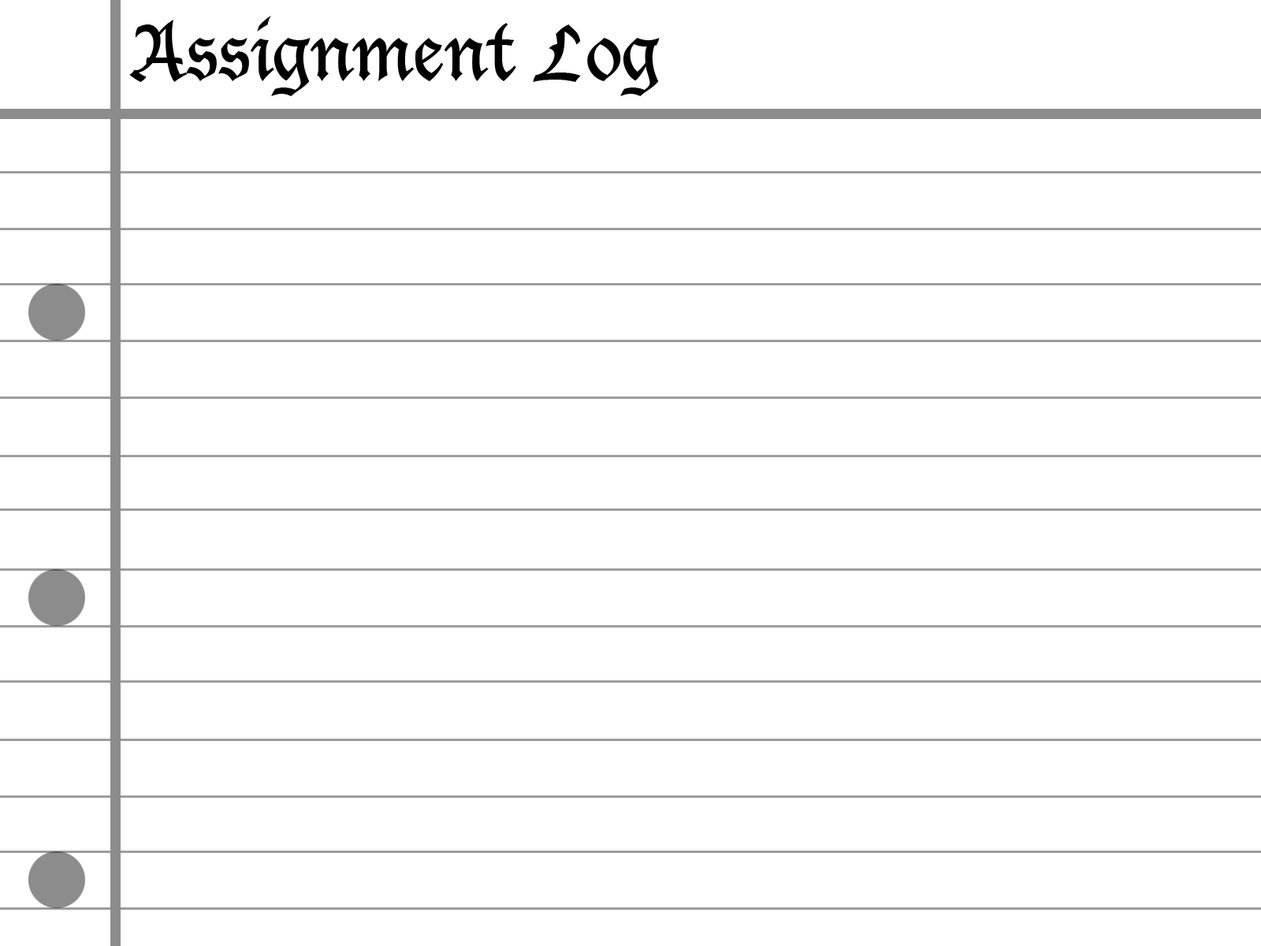
<style>
.page{position:relative;width:1261px;height:946px;background:#ffffff}
.page>*{position:absolute;margin:0}
.t1{font:75.7px "LucidaBlackletter";color:#000000}
</style>
<div class="page">
<p class="t1" style="left:129px;top:16px;width:531px;height:80px">Assignment Log</p>
</div>
